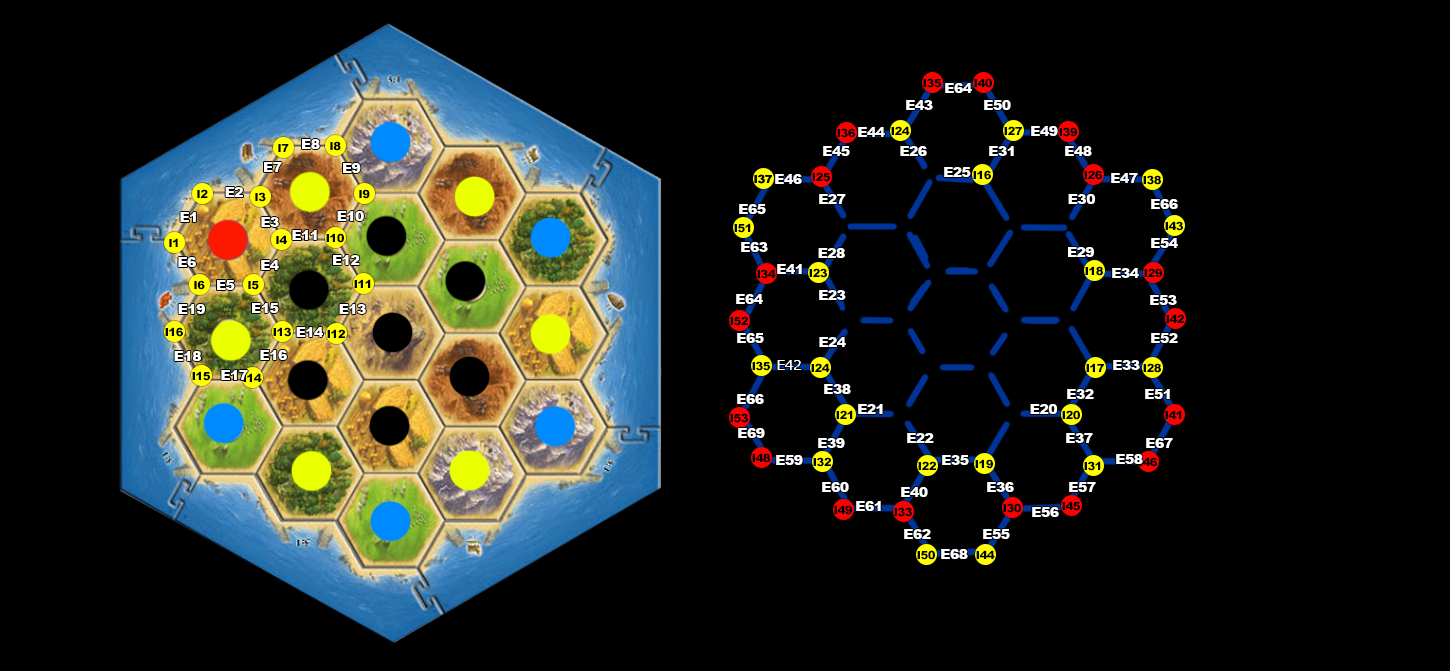
<style>
.page{position:relative;width:1450px;height:672px;background:#000000}
.page>*{position:absolute;margin:0}
.t1{font:11.2px "Arial-Black";letter-spacing:-0.04em;color:#000000}
.t2{font:14px "Arial-Black";letter-spacing:-0.04em;color:#ffffff}
.t3{font:14px "Verdana";letter-spacing:-0.04em;color:#ffffff}
</style>
<div class="page">
<p class="t1" style="left:923px;top:78px;width:18px;height:10px">I35</p>
<p class="t1" style="left:974px;top:78px;width:18px;height:10px">I40</p>
<p class="t2" style="left:945px;top:83px;width:27px;height:10px">E64</p>
<p class="t2" style="left:906px;top:100px;width:27px;height:10px">E43</p>
<p class="t2" style="left:984px;top:100px;width:27px;height:10px">E50</p>
<p class="t1" style="left:891px;top:126px;width:19px;height:9px">I24</p>
<p class="t1" style="left:1004px;top:126px;width:18px;height:9px">I27</p>
<p class="t2" style="left:1031px;top:126px;width:27px;height:10px">E49</p>
<p class="t1" style="left:837px;top:128px;width:18px;height:10px">I36</p>
<p class="t2" style="left:858px;top:127px;width:27px;height:10px">E44</p>
<p class="t1" style="left:1059px;top:127px;width:18px;height:10px">I39</p>
<p class="t1" style="left:278px;top:144px;width:11px;height:8px">I7</p>
<p class="t2" style="left:302px;top:139px;width:18px;height:10px">E8</p>
<p class="t1" style="left:330px;top:141px;width:11px;height:10px">I8</p>
<p class="t2" style="left:823px;top:146px;width:27px;height:10px">E45</p>
<p class="t2" style="left:900px;top:146px;width:27px;height:10px">E26</p>
<p class="t2" style="left:989px;top:146px;width:25px;height:10px">E31</p>
<p class="t2" style="left:1065px;top:146px;width:27px;height:10px">E48</p>
<p class="t2" style="left:264px;top:162px;width:18px;height:10px">E7</p>
<p class="t2" style="left:343px;top:163px;width:18px;height:10px">E9</p>
<p class="t1" style="left:754px;top:174px;width:18px;height:10px">I37</p>
<p class="t1" style="left:754px;top:174px;width:18px;height:10px">I37</p>
<p class="t2" style="left:775px;top:174px;width:27px;height:10px">E46</p>
<p class="t1" style="left:812px;top:172px;width:18px;height:10px">I25</p>
<p class="t2" style="left:944px;top:167px;width:27px;height:10px">E25</p>
<p class="t1" style="left:973px;top:170px;width:18px;height:10px">I16</p>
<p class="t1" style="left:1084px;top:170px;width:18px;height:10px">I26</p>
<p class="t2" style="left:1111px;top:173px;width:27px;height:10px">E47</p>
<p class="t1" style="left:1143px;top:175px;width:18px;height:10px">I38</p>
<p class="t1" style="left:197px;top:189px;width:11px;height:9px">I2</p>
<p class="t2" style="left:225px;top:187px;width:18px;height:10px">E2</p>
<p class="t1" style="left:255px;top:192px;width:11px;height:10px">I3</p>
<p class="t1" style="left:359px;top:189px;width:11px;height:10px">I9</p>
<p class="t2" style="left:819px;top:194px;width:27px;height:10px">E27</p>
<p class="t2" style="left:1068px;top:194px;width:27px;height:10px">E30</p>
<p class="t2" style="left:739px;top:204px;width:27px;height:10px">E65</p>
<p class="t2" style="left:1151px;top:199px;width:27px;height:10px">E66</p>
<p class="t2" style="left:180px;top:212px;width:16px;height:10px">E1</p>
<p class="t2" style="left:261px;top:217px;width:18px;height:10px">E3</p>
<p class="t2" style="left:337px;top:211px;width:27px;height:10px">E10</p>
<p class="t1" style="left:1165px;top:221px;width:18px;height:10px">I43</p>
<p class="t2" style="left:292px;top:230px;width:25px;height:10px">E11</p>
<p class="t1" style="left:326px;top:233px;width:18px;height:10px">I10</p>
<p class="t1" style="left:734px;top:223px;width:17px;height:10px">I51</p>
<p class="t1" style="left:169px;top:238px;width:9px;height:9px">I1</p>
<p class="t1" style="left:276px;top:235px;width:11px;height:9px">I4</p>
<p class="t2" style="left:741px;top:242px;width:27px;height:10px">E63</p>
<p class="t2" style="left:1151px;top:238px;width:27px;height:10px">E54</p>
<p class="t2" style="left:178px;top:257px;width:18px;height:10px">E6</p>
<p class="t2" style="left:333px;top:255px;width:27px;height:10px">E12</p>
<p class="t2" style="left:818px;top:248px;width:27px;height:10px">E28</p>
<p class="t2" style="left:1068px;top:247px;width:26px;height:10px">E29</p>
<p class="t2" style="left:261px;top:260px;width:18px;height:10px">E4</p>
<p class="t1" style="left:757px;top:269px;width:19px;height:10px">I34</p>
<p class="t2" style="left:777px;top:264px;width:25px;height:10px">E41</p>
<p class="t1" style="left:809px;top:268px;width:18px;height:10px">I23</p>
<p class="t1" style="left:1085px;top:266px;width:18px;height:10px">I18</p>
<p class="t2" style="left:1112px;top:268px;width:27px;height:10px">E34</p>
<p class="t1" style="left:1144px;top:268px;width:18px;height:10px">I29</p>
<p class="t1" style="left:194px;top:280px;width:11px;height:10px">I6</p>
<p class="t2" style="left:217px;top:280px;width:18px;height:10px">E5</p>
<p class="t1" style="left:248px;top:281px;width:11px;height:9px">I5</p>
<p class="t1" style="left:354px;top:279px;width:17px;height:9px">I11</p>
<p class="t2" style="left:736px;top:294px;width:27px;height:10px">E64</p>
<p class="t2" style="left:819px;top:290px;width:27px;height:10px">E23</p>
<p class="t2" style="left:178px;top:304px;width:27px;height:10px">E19</p>
<p class="t2" style="left:252px;top:303px;width:27px;height:10px">E15</p>
<p class="t2" style="left:339px;top:304px;width:27px;height:10px">E13</p>
<p class="t2" style="left:1150px;top:295px;width:27px;height:10px">E53</p>
<p class="t1" style="left:730px;top:316px;width:18px;height:10px">I52</p>
<p class="t1" style="left:1166px;top:314px;width:18px;height:9px">I42</p>
<p class="t1" style="left:165px;top:327px;width:18px;height:10px">I16</p>
<p class="t1" style="left:273px;top:327px;width:18px;height:10px">I13</p>
<p class="t2" style="left:296px;top:327px;width:27px;height:10px">E14</p>
<p class="t1" style="left:327px;top:329px;width:18px;height:9px">I12</p>
<p class="t2" style="left:737px;top:333px;width:27px;height:10px">E65</p>
<p class="t2" style="left:819px;top:337px;width:27px;height:10px">E24</p>
<p class="t2" style="left:1151px;top:333px;width:27px;height:10px">E52</p>
<p class="t2" style="left:174px;top:351px;width:27px;height:10px">E18</p>
<p class="t2" style="left:260px;top:350px;width:27px;height:10px">E16</p>
<p class="t1" style="left:752px;top:361px;width:18px;height:10px">I35</p>
<p class="t3" style="left:777px;top:360px;width:25px;height:10px">E42</p>
<p class="t1" style="left:811px;top:363px;width:19px;height:9px">I24</p>
<p class="t1" style="left:1086px;top:363px;width:18px;height:9px">I17</p>
<p class="t2" style="left:1113px;top:360px;width:27px;height:10px">E33</p>
<p class="t1" style="left:1143px;top:363px;width:18px;height:10px">I28</p>
<p class="t1" style="left:192px;top:371px;width:18px;height:10px">I15</p>
<p class="t2" style="left:221px;top:370px;width:27px;height:10px">E17</p>
<p class="t1" style="left:243px;top:373px;width:19px;height:9px">I14</p>
<p class="t2" style="left:824px;top:384px;width:27px;height:10px">E38</p>
<p class="t2" style="left:1067px;top:389px;width:27px;height:10px">E32</p>
<p class="t2" style="left:1145px;top:389px;width:25px;height:10px">E51</p>
<p class="t2" style="left:737px;top:394px;width:27px;height:10px">E66</p>
<p class="t1" style="left:730px;top:413px;width:18px;height:10px">I53</p>
<p class="t1" style="left:836px;top:410px;width:17px;height:9px">I21</p>
<p class="t2" style="left:858px;top:404px;width:25px;height:10px">E21</p>
<p class="t2" style="left:1030px;top:404px;width:27px;height:10px">E20</p>
<p class="t1" style="left:1062px;top:410px;width:18px;height:10px">I20</p>
<p class="t1" style="left:1165px;top:410px;width:17px;height:9px">I41</p>
<p class="t2" style="left:738px;top:428px;width:27px;height:10px">E69</p>
<p class="t2" style="left:818px;top:438px;width:27px;height:10px">E39</p>
<p class="t2" style="left:907px;top:433px;width:27px;height:10px">E22</p>
<p class="t2" style="left:1066px;top:433px;width:27px;height:10px">E37</p>
<p class="t2" style="left:1146px;top:438px;width:27px;height:10px">E67</p>
<p class="t1" style="left:752px;top:453px;width:18px;height:10px">I48</p>
<p class="t2" style="left:776px;top:455px;width:27px;height:10px">E59</p>
<p class="t1" style="left:813px;top:457px;width:18px;height:10px">I32</p>
<p class="t1" style="left:918px;top:461px;width:18px;height:9px">I22</p>
<p class="t2" style="left:942px;top:455px;width:27px;height:10px">E35</p>
<p class="t1" style="left:975px;top:459px;width:18px;height:10px">I19</p>
<p class="t1" style="left:1084px;top:461px;width:17px;height:10px">I31</p>
<p class="t2" style="left:1116px;top:454px;width:27px;height:10px">E58</p>
<p class="t1" style="left:1139px;top:457px;width:18px;height:10px">I46</p>
<p class="t2" style="left:822px;top:482px;width:27px;height:10px">E60</p>
<p class="t2" style="left:987px;top:482px;width:27px;height:10px">E36</p>
<p class="t2" style="left:1069px;top:482px;width:27px;height:10px">E57</p>
<p class="t2" style="left:901px;top:487px;width:27px;height:10px">E40</p>
<p class="t1" style="left:834px;top:505px;width:18px;height:10px">I49</p>
<p class="t2" style="left:856px;top:501px;width:25px;height:10px">E61</p>
<p class="t1" style="left:894px;top:507px;width:18px;height:10px">I33</p>
<p class="t1" style="left:1003px;top:503px;width:18px;height:10px">I30</p>
<p class="t2" style="left:1032px;top:507px;width:27px;height:10px">E56</p>
<p class="t1" style="left:1062px;top:501px;width:18px;height:10px">I45</p>
<p class="t2" style="left:904px;top:529px;width:27px;height:10px">E62</p>
<p class="t2" style="left:983px;top:529px;width:27px;height:10px">E55</p>
<p class="t1" style="left:917px;top:550px;width:18px;height:10px">I50</p>
<p class="t2" style="left:941px;top:549px;width:27px;height:10px">E68</p>
<p class="t1" style="left:976px;top:550px;width:19px;height:9px">I44</p>
</div>
